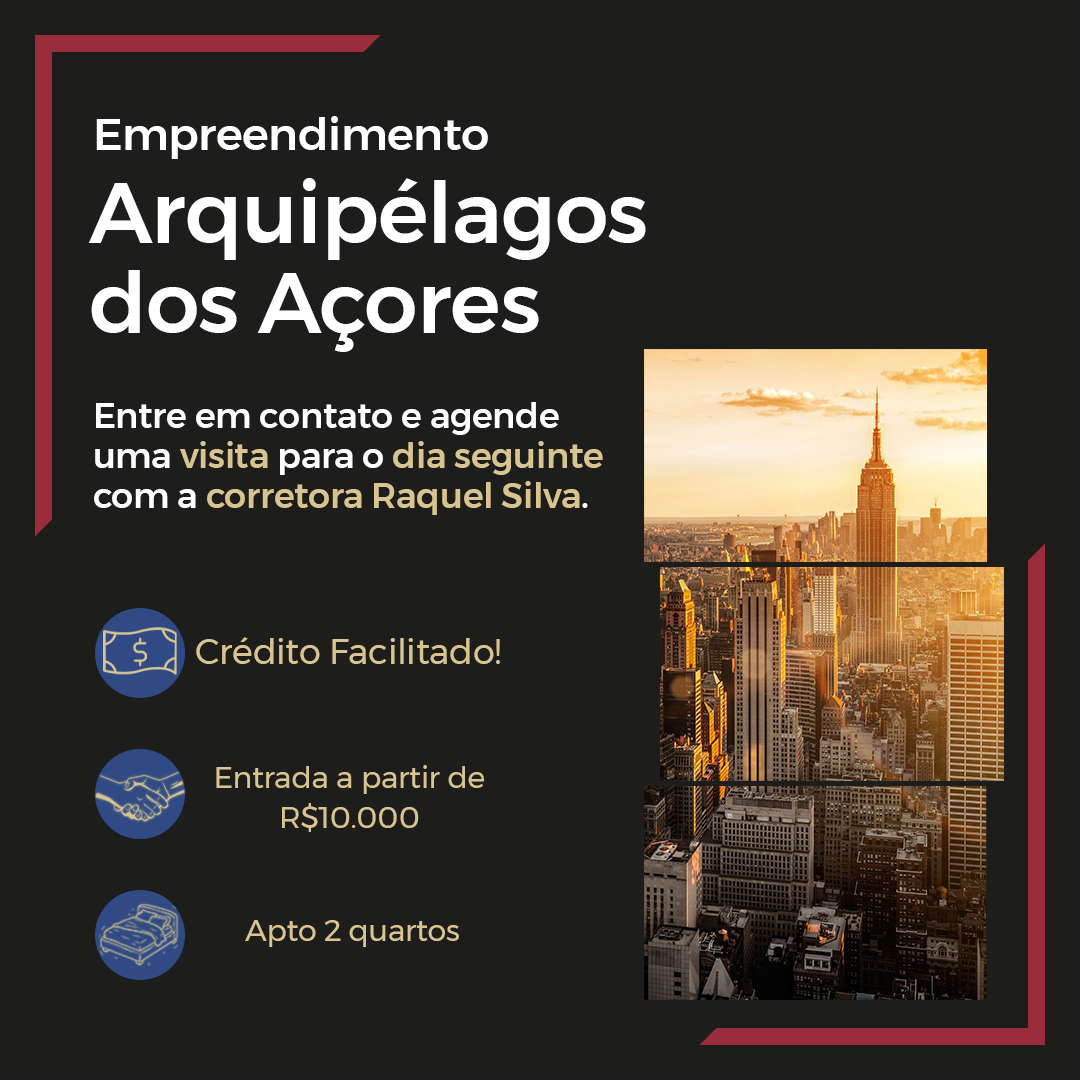
<style>
.page{position:relative;width:1080px;height:1080px;background:#1d1d1b}
.page>*{position:absolute;margin:0}
.t1{font:45px "Montserrat-Medium";letter-spacing:-0.01em;color:#ffffff}
.t2{font:85px/90px "Montserrat-Medium";letter-spacing:-0.01em;color:#ffffff}
.t3{font:35px/40px "Montserrat-Medium";letter-spacing:-0.01em;color:#ffffff}
.t4{font:35px/40px "Montserrat-Medium";letter-spacing:-0.01em;color:#d7c490}
.t5{font:35px "Montserrat-Regular";letter-spacing:-0.01em;color:#d7c490}
.t6{font:29.9px/39.9px "Montserrat-Regular";letter-spacing:-0.01em;color:#d7c490}
.t7{font:30.1px "Montserrat-Regular";letter-spacing:-0.01em;color:#d7c490}
</style>
<div class="page">
<p class="t1" style="left:96px;top:116px;width:392px;height:43px">Empreendimento</p>
<p class="t2" style="left:88px;top:178px;width:558px;height:174px">Arquipélagos <br>dos Açores</p>
<p class="t3" style="left:94px;top:402px;width:509px;height:113px">Entre em contato e agende uma <span class="t4">visita</span> para o <span class="t4">dia seguinte </span>com a <span class="t4">corretora Raquel Silva</span>.</p>
<p class="t5" style="left:196px;top:637px;width:304px;height:27px">Crédito Facilitado!</p>
<p class="t6" style="left:216px;top:765px;width:269px;height:67px;text-align:center">Entrada a partir de <br>R$10.000</p>
<p class="t7" style="left:245px;top:920px;width:214px;height:27px">Apto 2 quartos</p>
</div>
